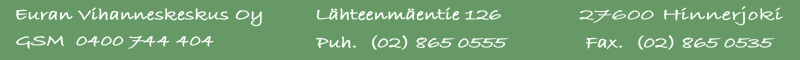
<style>
.page{position:relative;width:800px;height:60px;background:#669966}
.page>*{position:absolute;margin:0}
.t1{font:17px "BradleyHandITC";letter-spacing:-0.01em;color:#ffffff;font-weight:bold;scale:1.5 1}
.t2{font:17px "BradleyHandITC";letter-spacing:-0.01em;color:#ffffff;font-weight:bold;scale:1.23 1}
</style>
<div class="page">
<p class="t1" style="left:579px;top:6px;width:204px;height:20px">27600 Hinnerjoki</p>
<p class="t2" style="left:15px;top:7px;width:247px;height:20px">Euran Vihanneskeskus Oy</p>
<p class="t2" style="left:316px;top:7px;width:185px;height:14px">Lähteenmäentie 126</p>
<p class="t2" style="left:16px;top:35px;width:198px;height:14px">GSM  0400 744 404</p>
<p class="t2" style="left:316px;top:35px;width:193px;height:15px">Puh.  (02) 865 0555</p>
<p class="t2" style="left:586px;top:35px;width:189px;height:15px">Fax.  (02) 865 0535</p>
</div>
